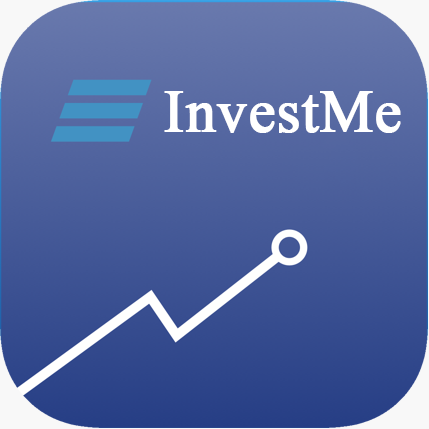
<style>
.page{position:relative;width:429px;height:429px}
.page>*{position:absolute;margin:0}
.t1{font:60px "TimesNewRomanPSMT";color:#ffffff;font-weight:bold}
</style>
<div class="page">
<p class="t1" style="left:164px;top:91px;width:237px;height:42px">InvestMe</p>
</div>
